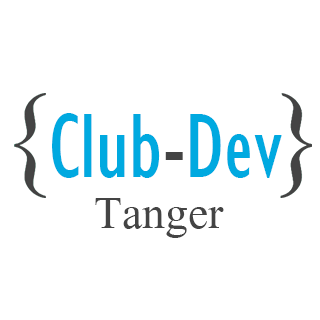
<style>
.page{position:relative;width:320px;height:320px;background:#ffffff}
.page>*{position:absolute;margin:0}
.t1{font:94px "GillSansMT-Condensed";color:#00a9e0}
.t2{font:94px "GillSansMT-Condensed";color:#444444}
.t3{font:69px "AngsanaNew";color:#444444}
</style>
<div class="page">
<p class="t1" style="left:52px;top:113px;width:230px;height:65px">Club<span class="t2">-</span>Dev</p>
<p class="t3" style="left:95px;top:198px;width:129px;height:40px">Tanger</p>
</div>
